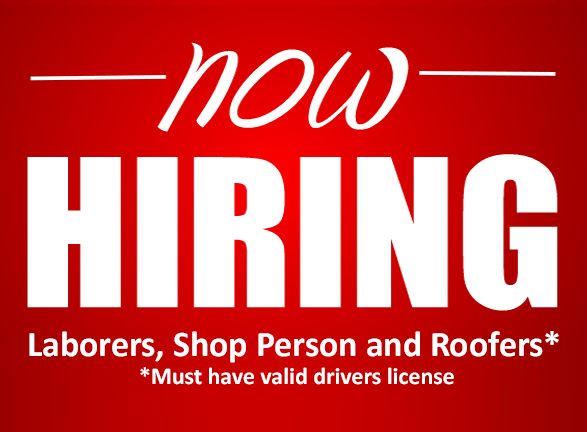
<style>
.page{position:relative;width:587px;height:432px;background:#ffffff}
.page>*{position:absolute;margin:0}
.t1{font:35.9px/23.9px "Calibri-Bold";color:#ffffff}
.t2{font:23.9px/28px "Calibri-Bold";color:#ffffff}
</style>
<div class="page">
<p class="t1" style="left:29px;top:331px;width:530px;height:54px;text-align:center">Laborers, Shop Person and Roofers* <br><span class="t2">*Must have valid drivers license</span></p>
</div>
